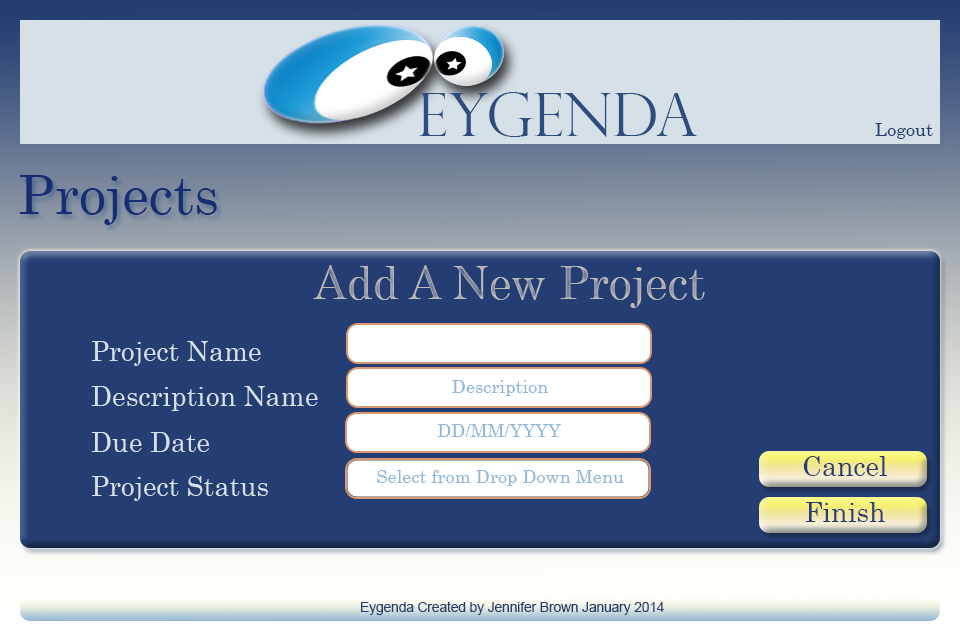
<style>
.page{position:relative;width:960px;height:640px;background:#243e73}
.page>*{position:absolute;margin:0}
.t1{font:60px "PerpetuaTitlingMT-Light";color:#2d4d80}
.t2{font:18.1px "Century";color:#243e73}
.t3{font:54.3px "Century";color:#172d73}
.t4{font:45.3px "Century"}
.t5{font:27.2px "Century";color:#d6e1e7}
.t6{font:18.1px "Century";color:#91b7d9}
.t7{font:27.2px "Century";color:#243e73}
.t8{font:13.6px "ArialMT";color:#243e73}
</style>
<div class="page">
<p class="t1" style="left:419px;top:92px;width:278px;height:45px">EYGENDA</p>
<p class="t2" style="left:875px;top:123px;width:58px;height:16px">Logout</p>
<p class="t3" style="left:20px;top:175px;width:197px;height:50px">Projects</p>
<p class="t4" style="left:313px;top:265px;width:392px;height:43px">Add A New Project</p>
<p class="t5" style="left:92px;top:341px;width:169px;height:25px">Project Name</p>
<p class="t5" style="left:91px;top:386px;width:227px;height:25px">Description Name</p>
<p class="t6" style="left:452px;top:380px;width:96px;height:16px">Description</p>
<p class="t6" style="left:437px;top:424px;width:124px;height:13px">DD/MM/YYYY</p>
<p class="t5" style="left:91px;top:432px;width:118px;height:20px">Due Date</p>
<p class="t7" style="left:803px;top:456px;width:84px;height:20px">Cancel</p>
<p class="t6" style="left:377px;top:470px;width:247px;height:16px">Select from Drop Down Menu</p>
<p class="t5" style="left:92px;top:476px;width:176px;height:25px">Project Status</p>
<p class="t7" style="left:805px;top:502px;width:80px;height:20px">Finish</p>
<p class="t8" style="left:361px;top:601px;width:303px;height:14px">Eygenda Created by Jennifer Brown January 2014</p>
</div>
